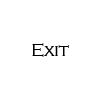
<style>
.page{position:relative;width:100px;height:100px;background:#ffffff}
.page>*{position:absolute;margin:0}
.t1{font:18px "CopperplateGothic-Light";color:#000000}
</style>
<div class="page">
<p class="t1" style="left:32px;top:43px;width:37px;height:14px">Exit</p>
</div>
